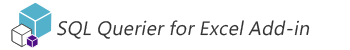
<style>
.page{position:relative;width:350px;height:50px;background:#ffffff}
.page>*{position:absolute;margin:0}
.t1{font:18px "MicrosoftJhengHeiRegular";letter-spacing:0.025em;color:#333333;font-style:italic}
</style>
<div class="page">
<p class="t1" style="left:57px;top:20px;width:253px;height:19px">SQL Querier for Excel Add-in</p>
</div>
